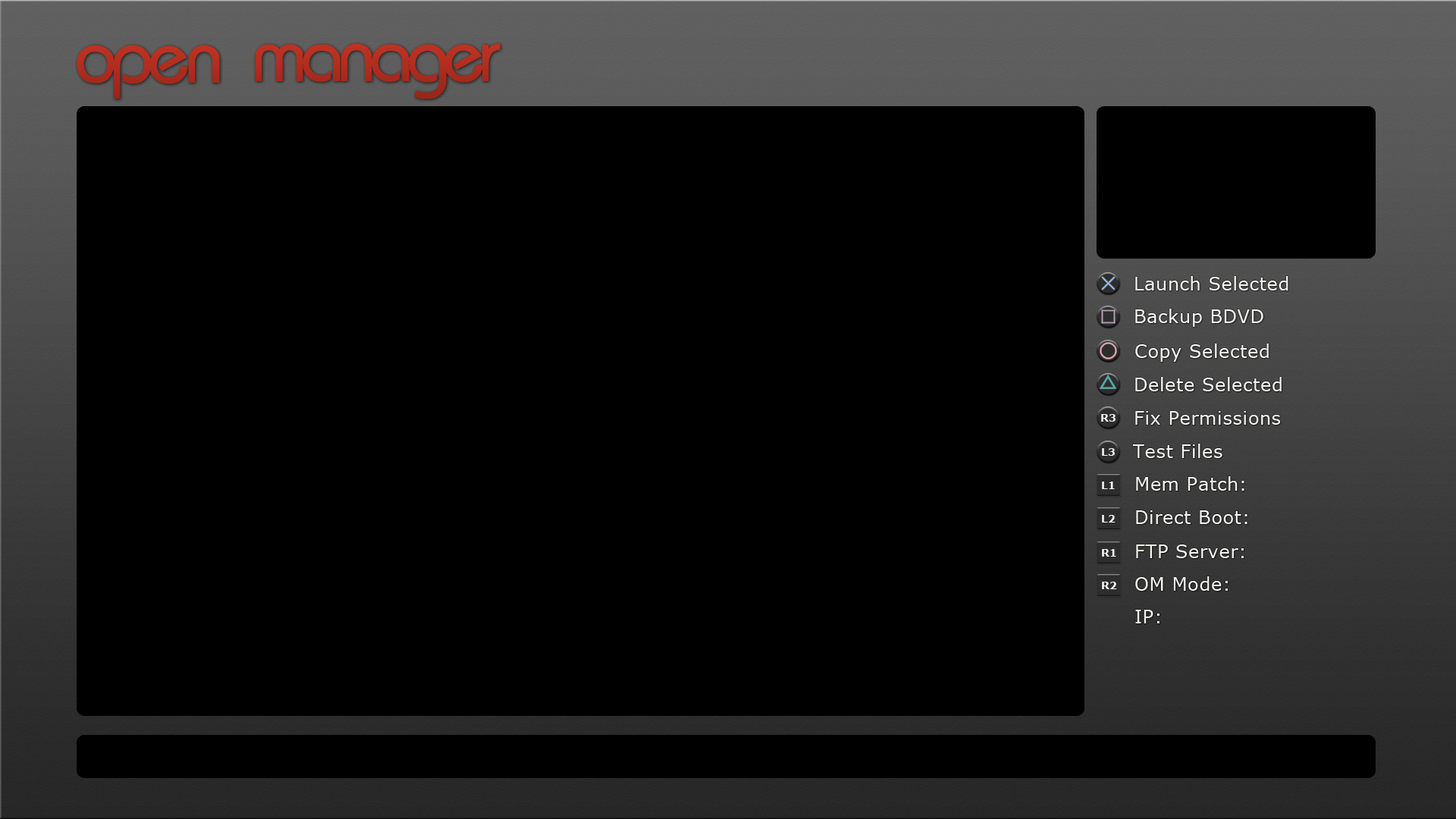
<style>
.page{position:relative;width:1456px;height:819px;background:#000000}
.page>*{position:absolute;margin:0}
.t1{font:75.8px "Bauhaus";letter-spacing:-0.075em;color:#b22e1f}
.t2{font:75.8px "Bauhaus";letter-spacing:-0.075em;color:#b22e20}
.t3{font:18.2px "Verdana";letter-spacing:0.025em;color:#f5f5f2}
.t4{font:10.6px "Verdana-Bold";color:#f5f5f2}
</style>
<div class="page">
<p class="t1" style="left:77px;top:45px;width:143px;height:54px">open</p>
<p class="t2" style="left:255px;top:43px;width:245px;height:56px">manager</p>
<p class="t3" style="left:1135px;top:276px;width:153px;height:14px">Launch Selected</p>
<p class="t3" style="left:1135px;top:309px;width:128px;height:18px">Backup BDVD</p>
<p class="t3" style="left:1135px;top:344px;width:134px;height:18px">Copy Selected</p>
<p class="t3" style="left:1135px;top:377px;width:147px;height:14px">Delete Selected</p>
<p class="t3" style="left:1135px;top:411px;width:145px;height:14px">Fix Permissions</p>
<p class="t4" style="left:1101px;top:414px;width:14px;height:8px">R3</p>
<p class="t4" style="left:1102px;top:448px;width:13px;height:8px">L3</p>
<p class="t3" style="left:1133px;top:444px;width:89px;height:14px">Test Files</p>
<p class="t4" style="left:1102px;top:482px;width:13px;height:7px">L1</p>
<p class="t3" style="left:1136px;top:476px;width:108px;height:15px">Mem Patch:</p>
<p class="t4" style="left:1102px;top:515px;width:13px;height:7px">L2</p>
<p class="t3" style="left:1136px;top:510px;width:111px;height:14px">Direct Boot:</p>
<p class="t3" style="left:1136px;top:544px;width:108px;height:14px">FTP Server:</p>
<p class="t4" style="left:1102px;top:549px;width:14px;height:8px">R1</p>
<p class="t4" style="left:1102px;top:582px;width:15px;height:7px">R2</p>
<p class="t3" style="left:1135px;top:576px;width:93px;height:15px">OM Mode:</p>
<p class="t3" style="left:1135px;top:610px;width:24px;height:13px">IP:</p>
</div>
